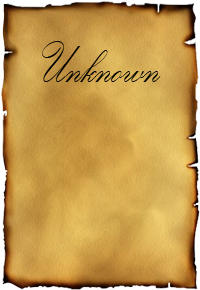
<style>
.page{position:relative;width:200px;height:290px}
.page>*{position:absolute;margin:0}
.t1{font:60px "KunstlerScript";color:#000000;scale:0.73 1}
</style>
<div class="page">
<p class="t1" style="left:42px;top:41px;width:119px;height:41px">Unknown</p>
</div>
